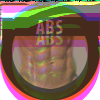
<style>
.page{position:relative;width:100px;height:100px}
.page>*{position:absolute;margin:0}
.t1{font:20.8px "MyriadPro-BoldCond"}
</style>
<div class="page">
<p class="t1" style="left:35px;top:19px;width:27px;height:14px">ABS</p>
</div>
